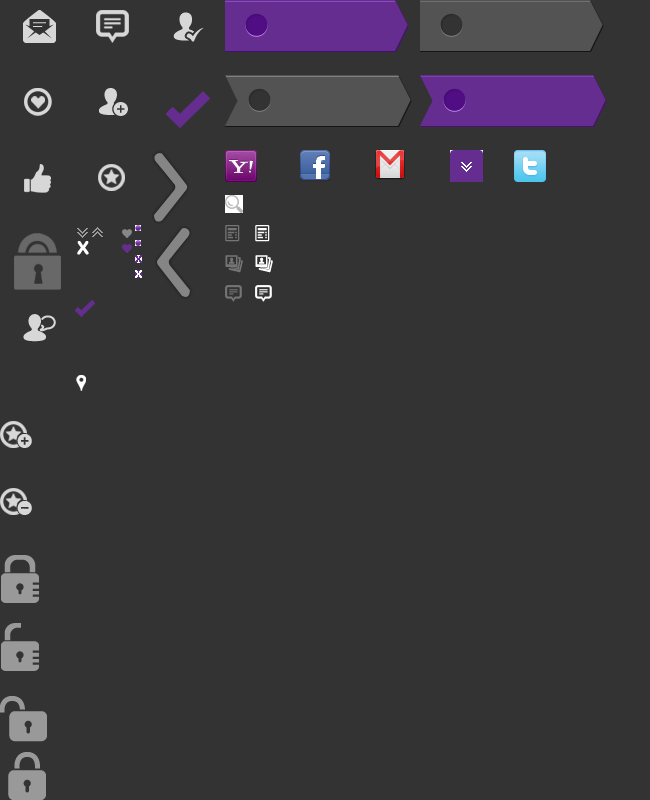
<style>
.page{position:relative;width:650px;height:800px;background:#333333}
.page>*{position:absolute;margin:0}
.t1{font:18px "ArialRoundedMTBold";letter-spacing:0.01em;color:#ffffff;font-weight:bold;scale:1.05 1}
</style>
<div class="page">
<p class="t1" style="left:77px;top:241px;width:12px;height:14px">X</p>
</div>
